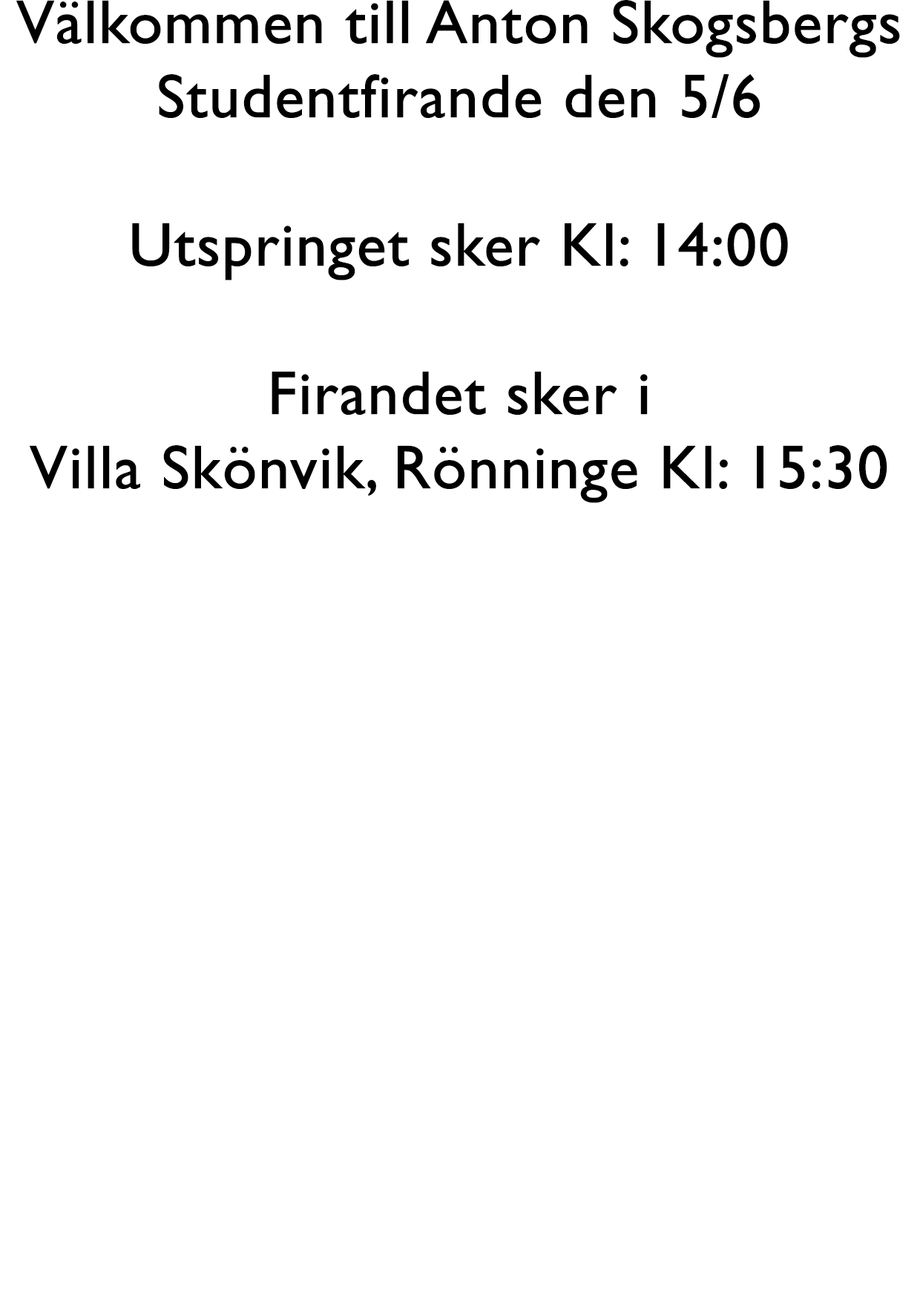
<style>
.page{position:relative;width:920px;height:1297px;background:#ffffff}
.page>*{position:absolute;margin:0}
.t1{font:61.8px "GillSansMT";color:#000000;font-weight:bold}
</style>
<div class="page">
<p class="t1" style="left:16px;top:0px;width:884px;height:503px;text-align:center">Välkommen till Anton Skogsbergs Studentfirande den 5/6<br><br>Utspringet sker Kl: 14:00 <br><br>Firandet sker i <br>Villa Skönvik, Rönninge Kl: 15:30</p>
</div>
